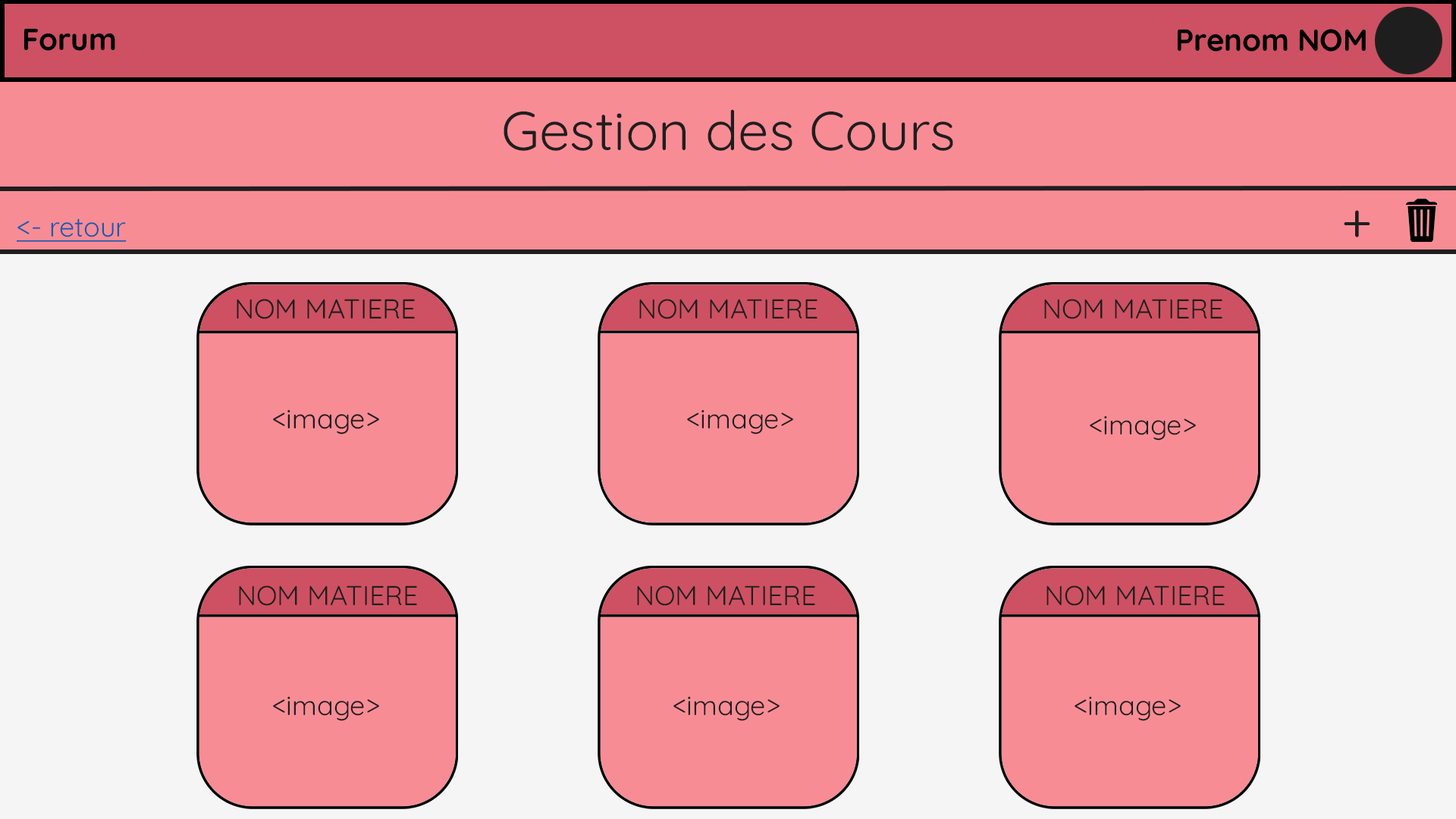
<style>
.page{position:relative;width:1456px;height:819px;background:#f88c95}
.page>*{position:absolute;margin:0}
.t1{font:54.6px "Quicksand-Regular";color:#1f1e1f}
.t2{font:27.3px "Quicksand-Regular";color:#145bb2;text-decoration:underline}
.t3{font:27.3px "Quicksand-Regular";color:#1f1e1f}
</style>
<div class="page">
<p class="t1" style="left:504px;top:109px;width:449px;height:42px">Gestion des Cours</p>
<p class="t2" style="left:17px;top:218px;width:110px;height:24px">&lt;- retour</p>
<p class="t1" style="left:1344px;top:210px;width:26px;height:27px">+</p>
<p class="t3" style="left:237px;top:299px;width:178px;height:20px">NOM MATIERE</p>
<p class="t3" style="left:639px;top:299px;width:178px;height:20px">NOM MATIERE</p>
<p class="t3" style="left:1044px;top:299px;width:178px;height:20px">NOM MATIERE</p>
<p class="t3" style="left:273px;top:409px;width:106px;height:26px">&lt;image&gt;</p>
<p class="t3" style="left:687px;top:409px;width:106px;height:26px">&lt;image&gt;</p>
<p class="t3" style="left:1090px;top:416px;width:106px;height:25px">&lt;image&gt;</p>
<p class="t3" style="left:239px;top:585px;width:178px;height:21px">NOM MATIERE</p>
<p class="t3" style="left:637px;top:585px;width:178px;height:21px">NOM MATIERE</p>
<p class="t3" style="left:1046px;top:585px;width:179px;height:21px">NOM MATIERE</p>
<p class="t3" style="left:273px;top:696px;width:106px;height:25px">&lt;image&gt;</p>
<p class="t3" style="left:673px;top:696px;width:107px;height:25px">&lt;image&gt;</p>
<p class="t3" style="left:1075px;top:696px;width:106px;height:25px">&lt;image&gt;</p>
</div>
